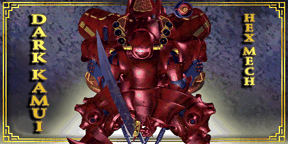
<style>
.page{position:relative;width:288px;height:144px}
.page>*{position:absolute;margin:0}
.t1{font:12.9px "StempelSchneidlerStd-Black";scale:1.38 1}
.t2{font:10.1px "StempelSchneidlerStd-Black";scale:1.24 1}
</style>
<div class="page">
<p class="t1" style="left:30px;top:14px;width:19px;height:117px">DARK KAMUI</p>
<p class="t2" style="left:243px;top:14px;width:13px;height:71px">HEX MECH</p>
</div>
